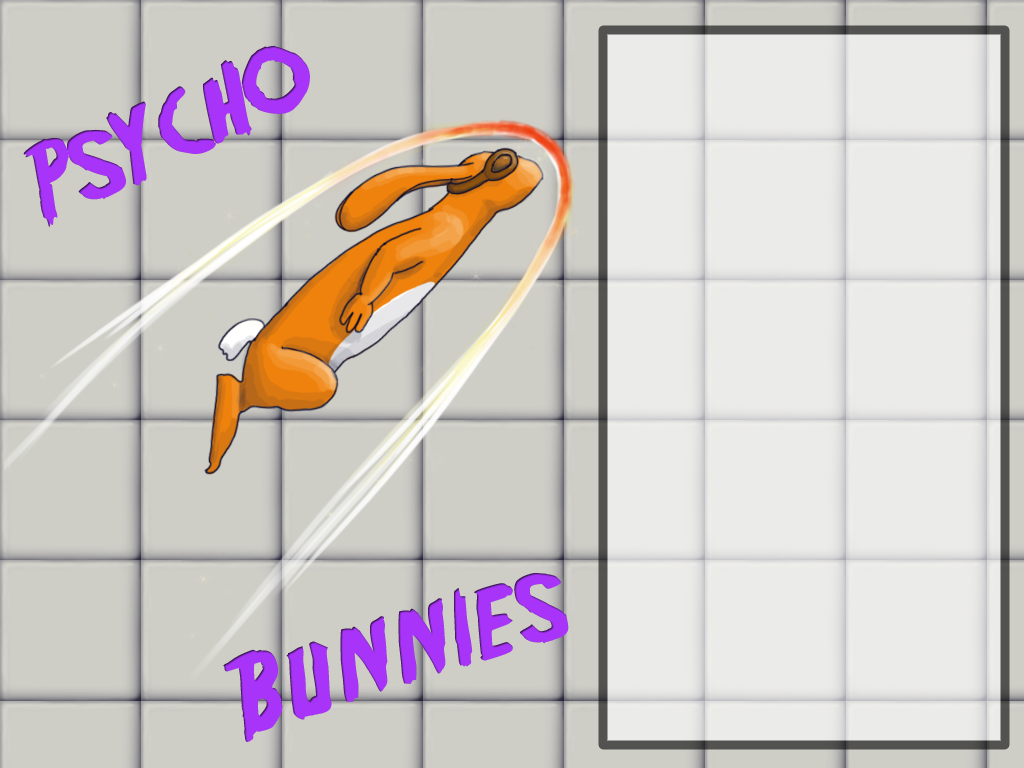
<style>
.page{position:relative;width:1024px;height:768px;background:#cecec7}
.page>*{position:absolute;margin:0}
.t1{font:100px "Friday13";color:#a834f9}
</style>
<div class="page">
<p class="t1" style="left:23px;top:45px;width:287px;height:183px;rotate:-25deg">Psycho</p>
<p class="t1" style="left:223px;top:573px;width:346px;height:169px;rotate:-17deg">Bunnies</p>
</div>
